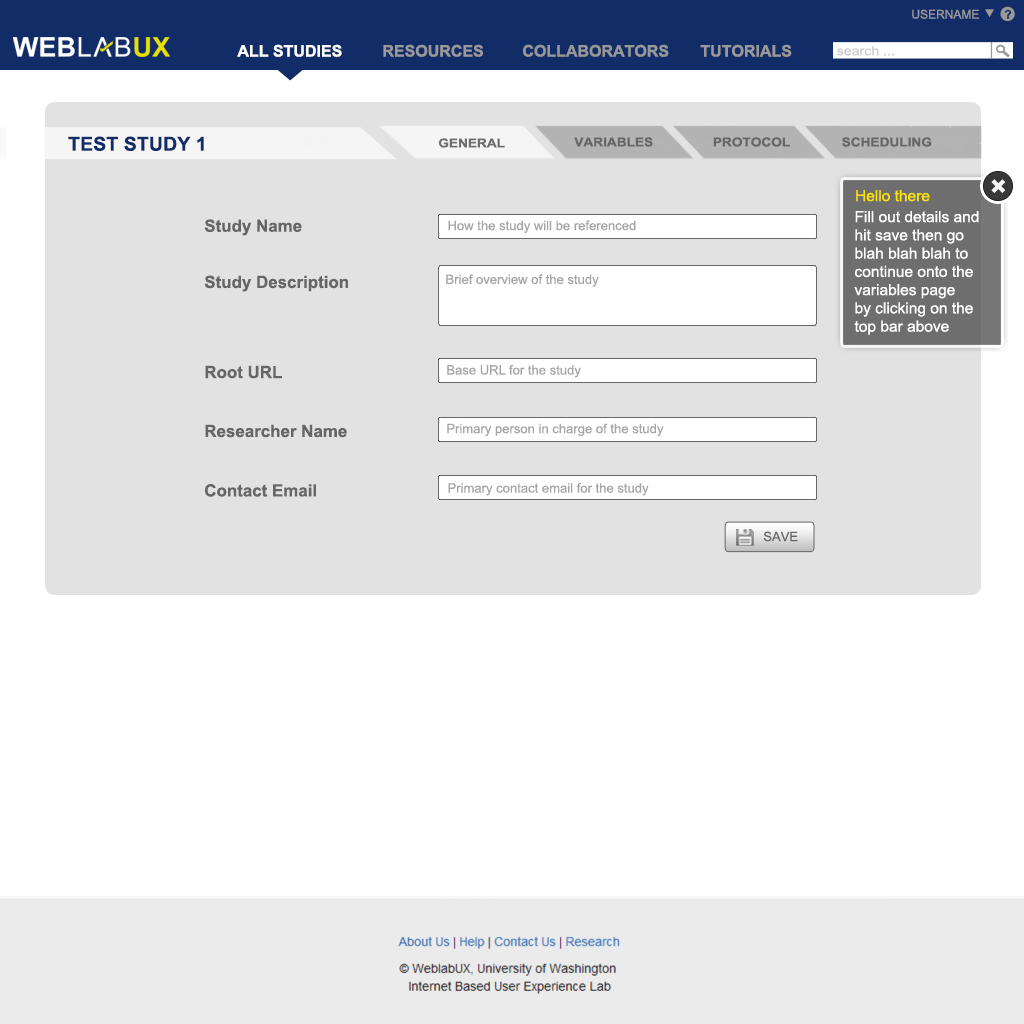
<style>
.page{position:relative;width:1024px;height:1024px;background:#ffffff}
.page>*{position:absolute;margin:0}
.t1{font:12px "ArialMT";color:#999999}
.t2{font:12px "Arial-BoldMT";color:#122c67}
.t3{font:16px "Arial-BoldMT";color:#ffffff}
.t4{font:16px "Arial-BoldMT";color:#999999}
.t5{font:16px "Arial-BoldMT";color:#989898}
.t6{font:12.9px "ArialMT";color:#cccccc;scale:1.1 1}
.t7{font:19.2px "Arial-BoldMT";color:#122c67}
.t8{font:12.4px "Arial-BoldMT";color:#666666;scale:1.1 1}
.t9{font:12.4px "Arial-BoldMT";color:#6d6d6d;scale:1.1 1}
.t10{font:30px "Arial-BoldMT";color:#f5f5f5}
.t11{font:15.2px "ArialMT";color:#ffe400}
.t12{font:16.9px "Arial-BoldMT";color:#666666}
.t13{font:13.1px "ArialMT";color:#a5a5a5}
.t14{font:15.2px "ArialMT";color:#ffffff}
.t15{font:13.1px "ArialMT";color:#666666}
</style>
<div class="page">
<p class="t1" style="left:912px;top:9px;width:67px;height:10px">USERNAME</p>
<p class="t2" style="left:1004px;top:9px;width:8px;height:10px">?</p>
<p class="t3" style="left:237px;top:44px;width:105px;height:13px">ALL STUDIES</p>
<p class="t4" style="left:383px;top:44px;width:100px;height:13px">RESOURCES</p>
<p class="t5" style="left:523px;top:44px;width:146px;height:13px">COLLABORATORS</p>
<p class="t4" style="left:700px;top:44px;width:92px;height:13px">TUTORIALS</p>
<p class="t6" style="left:837px;top:46px;width:57px;height:10px">search ...</p>
<p class="t7" style="left:68px;top:136px;width:136px;height:15px">TEST STUDY 1</p>
<p class="t8" style="left:574px;top:137px;width:79px;height:10px">VARIABLES</p>
<p class="t8" style="left:713px;top:137px;width:77px;height:10px">PROTOCOL</p>
<p class="t8" style="left:842px;top:137px;width:90px;height:10px">SCHEDULING</p>
<p class="t9" style="left:438px;top:138px;width:67px;height:10px">GENERAL</p>
<p class="t10" style="left:991px;top:179px;width:15px;height:14px;rotate:45deg">+</p>
<p class="t11" style="left:856px;top:190px;width:74px;height:12px">Hello there</p>
<p class="t12" style="left:204px;top:219px;width:98px;height:17px">Study Name</p>
<p class="t13" style="left:448px;top:220px;width:188px;height:13px">How the study will be referenced</p>
<p class="t14" style="left:854px;top:211px;width:125px;height:124px">Fill out details and<br>hit save then go<br>blah blah blah to<br>continue onto the<br>variables page<br>by clicking on the<br>top bar above</p>
<p class="t12" style="left:204px;top:275px;width:144px;height:17px">Study Description</p>
<p class="t13" style="left:446px;top:274px;width:153px;height:13px">Brief overview of the study</p>
<p class="t12" style="left:205px;top:365px;width:77px;height:14px">Root URL</p>
<p class="t13" style="left:447px;top:365px;width:134px;height:13px">Base URL for the study</p>
<p class="t12" style="left:205px;top:424px;width:142px;height:14px">Researcher Name</p>
<p class="t13" style="left:447px;top:423px;width:217px;height:13px">Primary person in charge of the study</p>
<p class="t12" style="left:205px;top:484px;width:111px;height:13px">Contact Email</p>
<p class="t13" style="left:448px;top:483px;width:201px;height:13px">Primary contact email for the study</p>
<p class="t15" style="left:763px;top:531px;width:35px;height:11px">SAVE</p>
</div>
